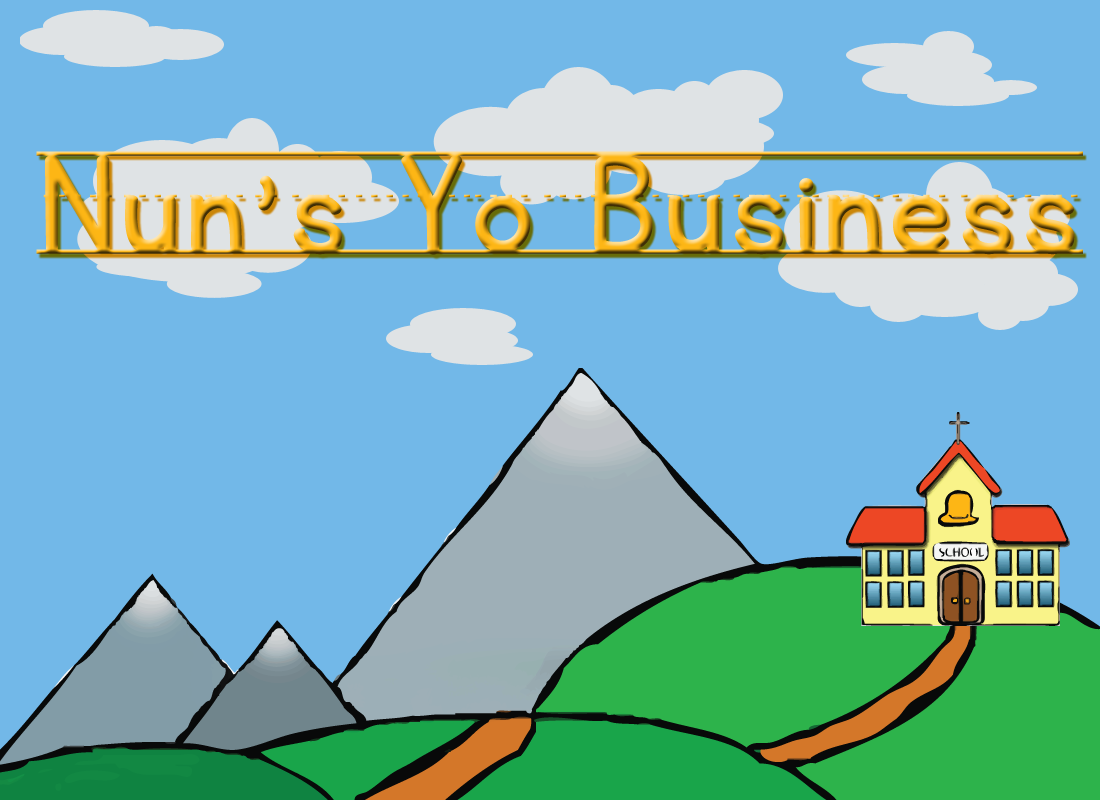
<style>
.page{position:relative;width:1100px;height:800px;background:#72b8e8}
.page>*{position:absolute;margin:0}
.t1{font:160px "KGPrimaryPenmanshipLined"}
</style>
<div class="page">
<p class="t1" style="left:36px;top:151px;width:1047px;height:104px">Nun’s Yo Business</p>
</div>
